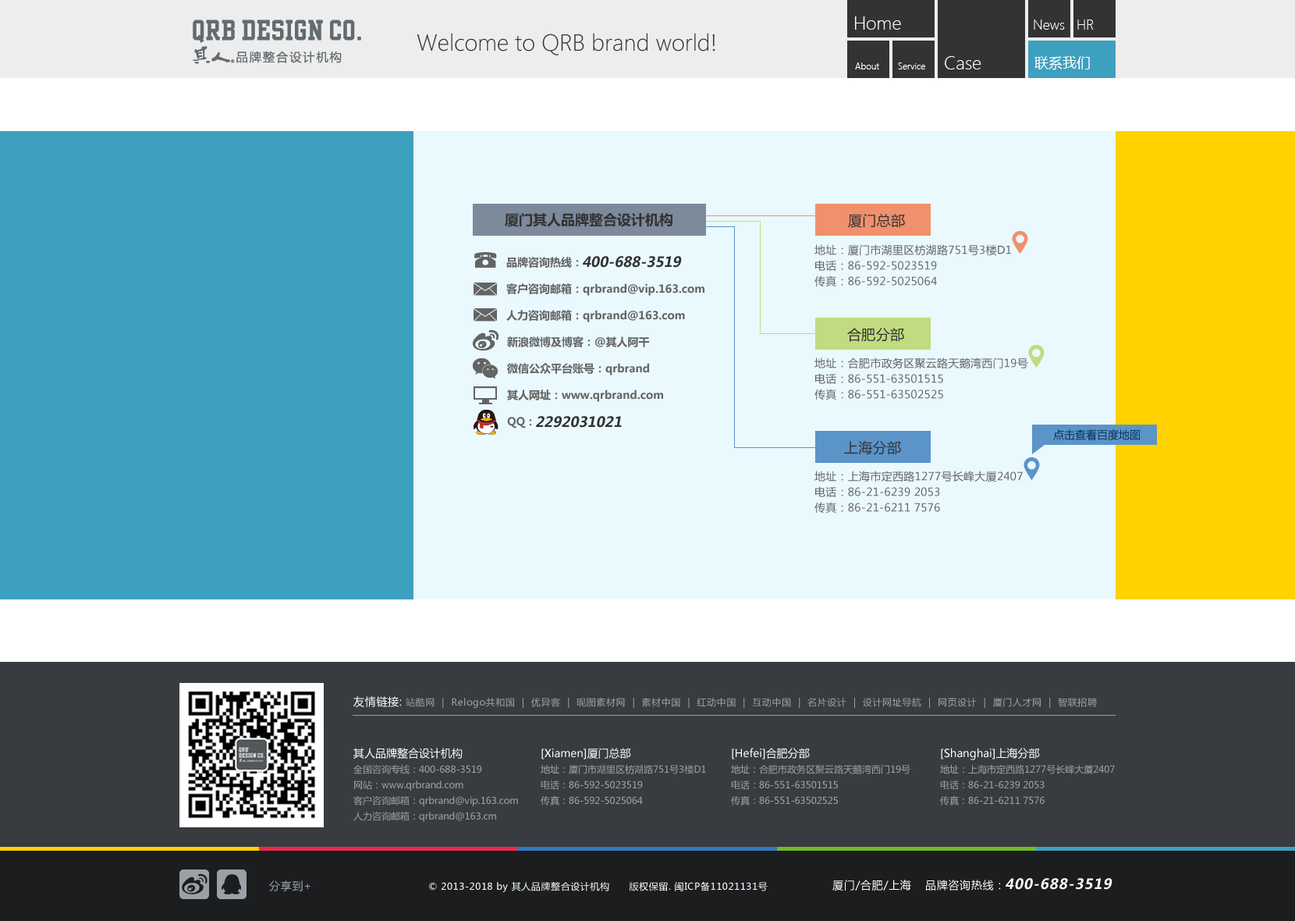
<style>
.page{position:relative;width:1295px;height:921px;background:#e9f9fe}
.page>*{position:absolute;margin:0}
.t1{font:18.7px "SegoeUI-Light";color:#ffffff}
.t2{font:14px "SegoeUI-Light";color:#ffffff}
.t3{font:23.4px "SegoeUI-Light";color:#333333}
.t4{font:9.4px "SegoeUI-Light";color:#ffffff}
.t5{font:14px "MicrosoftYaHei";color:#ffffff}
.t6{font:14px "MicrosoftYaHei-Bold";color:#333333}
.t7{font:14px "MicrosoftYaHei";letter-spacing:0.02em;color:#333333}
.t8{font:10.9px/15.6px "MicrosoftYaHei";letter-spacing:0.02em;color:#646464}
.t9{font:10.9px/26.5px "MicrosoftYaHei-Bold";color:#646464}
.t10{font:14px "MicrosoftYaHei-Bold";color:#323232;font-style:italic}
.t11{font:10.9px "MicrosoftYaHei";color:#09345b}
.t12{font:9.4px "MicrosoftYaHei";letter-spacing:0.05em;color:#9ba0a7}
.t13{font:10.9px "MicrosoftYaHei";letter-spacing:0.05em;color:#ffffff}
.t14{font:9.4px/15.6px "MicrosoftYaHei";color:#9ba0a7}
.t15{font:10.9px/15.6px "MicrosoftYaHei";color:#ffffff}
.t16{font:10.9px "MicrosoftYaHei";letter-spacing:0.05em;color:#9ba0a7}
.t17{font:9.4px "MicrosoftYaHei";letter-spacing:0.05em;color:#ffffff}
.t18{font:14px "MicrosoftYaHei-Bold";letter-spacing:0.05em;color:#ffffff;font-style:italic}
</style>
<div class="page">
<p class="t1" style="left:855px;top:16px;width:46px;height:14px">Home</p>
<p class="t2" style="left:1034px;top:20px;width:31px;height:10px">News</p>
<p class="t2" style="left:1077px;top:20px;width:17px;height:10px">HR</p>
<p class="t3" style="left:417px;top:33px;width:298px;height:22px">Welcome to QRB brand world!</p>
<p class="t4" style="left:855px;top:62px;width:24px;height:7px">About</p>
<p class="t4" style="left:898px;top:62px;width:27px;height:7px">Service</p>
<p class="t1" style="left:945px;top:56px;width:37px;height:13px">Case</p>
<p class="t5" style="left:1035px;top:56px;width:55px;height:14px">联系我们</p>
<p class="t6" style="left:505px;top:213px;width:168px;height:14px">厦门其人品牌整合设计机构</p>
<p class="t7" style="left:848px;top:214px;width:57px;height:14px">厦门总部</p>
<p class="t8" style="left:815px;top:244px;width:196px;height:43px;text-align:justify">地址：厦门市湖里区枋湖路751号3楼D1<br>电话：86-592-5023519<br>传真：86-592-5025064</p>
<p class="t9" style="left:506px;top:257px;width:199px;height:65px">品牌咨询热线：<br>客户咨询邮箱：qrbrand@vip.163.com      <br>人力咨询邮箱：qrbrand@163.com</p>
<p class="t10" style="left:583px;top:256px;width:99px;height:12px">400-688-3519</p>
<p class="t7" style="left:847px;top:328px;width:57px;height:14px">合肥分部</p>
<p class="t9" style="left:507px;top:336px;width:156px;height:92px">新浪微博及博客：@其人阿干<br>微信公众平台账号：qrbrand<br>其人网址：www.qrbrand.com<br>QQ：</p>
<p class="t8" style="left:815px;top:357px;width:213px;height:43px;text-align:justify">地址：合肥市政务区聚云路天鹅湾西门19号<br>电话：86-551-63501515<br>传真：86-551-63502525</p>
<p class="t10" style="left:536px;top:416px;width:86px;height:12px">2292031021</p>
<p class="t11" style="left:1053px;top:429px;width:87px;height:11px">点击查看百度地图</p>
<p class="t7" style="left:844px;top:441px;width:57px;height:14px">上海分部</p>
<p class="t8" style="left:815px;top:470px;width:208px;height:43px;text-align:justify">地址：上海市定西路1277号长峰大厦2407<br>电话：86-21-6239 2053<br>传真：86-21-6211 7576</p>
<p class="t12" style="left:353px;top:696px;width:744px;height:12px"><span class="t13">友情链接: </span>站酷网  |  Relogo共和国  |  优异客  |  昵图素材网  |  素材中国  |  红动中国  |  互动中国  |  名片设计  |  设计网址导航  |  网页设计  |  厦门人才网  |  智联招聘</p>
<p class="t14" style="left:353px;top:747px;width:165px;height:75px"><span class="t15">其人品牌整合设计机构<br></span>全国咨询专线：400-688-3519<br>网站：www.qrbrand.com<br>客户咨询邮箱：qrbrand@vip.163.com<br>人力咨询邮箱：qrbrand@163.cm</p>
<p class="t14" style="left:541px;top:747px;width:165px;height:58px"><span class="t15">[Xiamen]厦门总部<br></span>地址：厦门市湖里区枋湖路751号3楼D1<br>电话：86-592-5023519<br>传真：86-592-5025064</p>
<p class="t14" style="left:731px;top:747px;width:180px;height:58px"><span class="t15">[Hefei]合肥分部<br></span>地址：合肥市政务区聚云路天鹅湾西门19号<br>电话：86-551-63501515<br>传真：86-551-63502525</p>
<p class="t14" style="left:940px;top:747px;width:175px;height:58px"><span class="t15">[Shanghai]上海分部<br></span>地址：上海市定西路1277号长峰大厦2407<br>电话：86-21-6239 2053<br>传真：86-21-6211 7576</p>
<p class="t16" style="left:269px;top:880px;width:42px;height:11px">分享到+</p>
<p class="t17" style="left:429px;top:881px;width:339px;height:11px">© 2013-2018 by 其人品牌整合设计机构      版权保留. 闽ICP备11021131号</p>
<p class="t13" style="left:833px;top:879px;width:78px;height:11px">厦门/合肥/上海</p>
<p class="t13" style="left:926px;top:879px;width:75px;height:11px">品牌咨询热线：</p>
<p class="t18" style="left:1006px;top:878px;width:107px;height:11px">400-688-3519</p>
</div>
